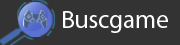
<style>
.page{position:relative;width:180px;height:45px;background:#333333}
.page>*{position:absolute;margin:0}
.t1{font:25.4px "Roboto-Bold";letter-spacing:-0.01em;color:#ffffff}
</style>
<div class="page">
<p class="t1" style="left:63px;top:11px;width:105px;height:22px">Buscgame</p>
</div>
